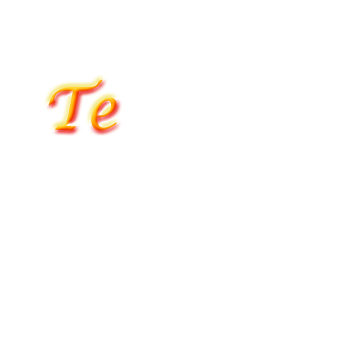
<style>
.page{position:relative;width:360px;height:360px;background:#ffffff}
.page>*{position:absolute;margin:0}
.t1{font:59px "LucidaCalligraphy-Italic"}
</style>
<div class="page">
<p class="t1" style="left:48px;top:79px;width:69px;height:52px">Te</p>
</div>
